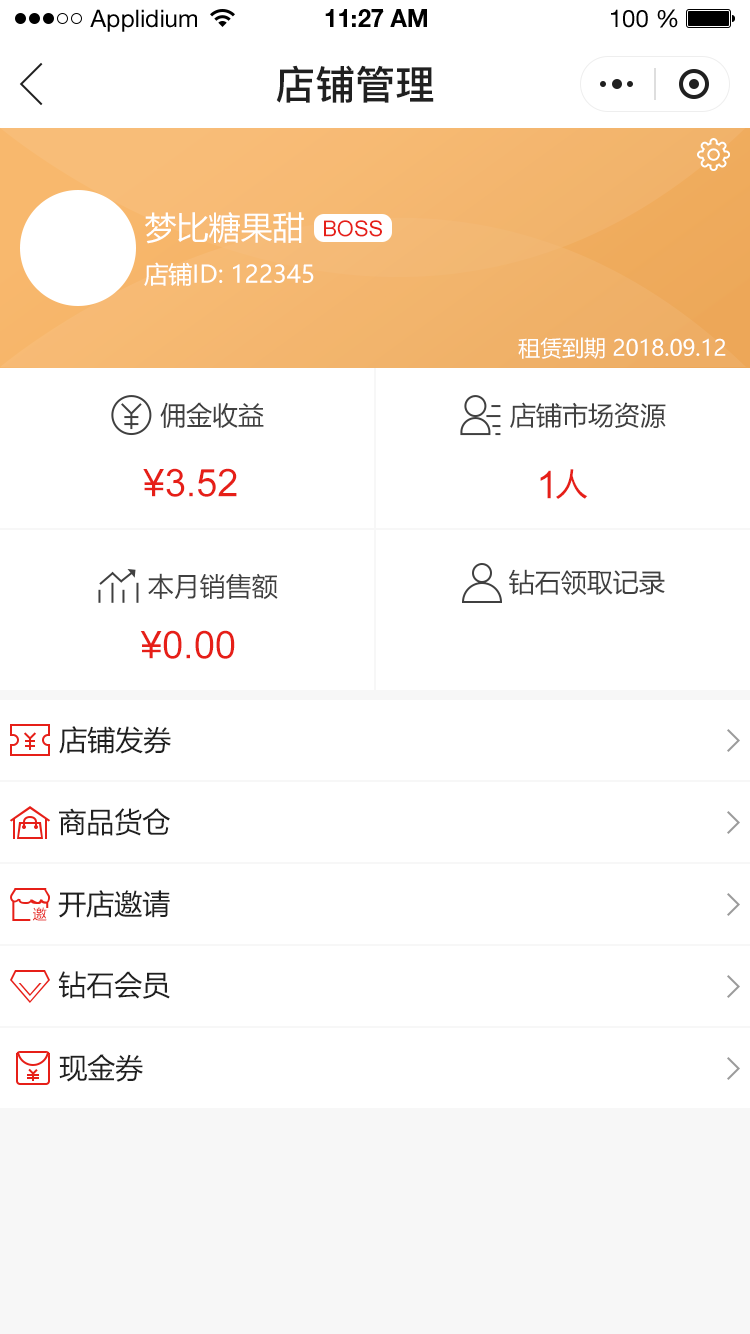
<style>
.page{position:relative;width:750px;height:1334px;background:#ffffff}
.page>*{position:absolute;margin:0}
.t1{font:24px "HelveticaNeueLTStd-Roman";color:#000000}
.t2{font:24px "HelveticaNeueLTStd-Bd";color:#000000}
.t3{font:40px "PingFang-SC-Bold";color:#202020;text-transform:uppercase}
.t4{font:32px "MicrosoftYaHei";color:#ffffff;text-transform:uppercase}
.t5{font:22px "ArialMT";color:#e61f18;text-transform:uppercase}
.t6{font:24px "MicrosoftYaHei";color:#ffffff;text-transform:uppercase}
.t7{font:22px "MicrosoftYaHei";color:#ffffff;text-transform:uppercase}
.t8{font:26px "MicrosoftYaHei";color:#404040;text-transform:uppercase}
.t9{font:38px "ArialMT";color:#e61f18;text-transform:uppercase}
.t10{font:32px "MicrosoftYaHei";color:#e61f18;text-transform:uppercase}
.t11{font:28px "MicrosoftYaHei";color:#202020;text-transform:uppercase}
.t12{font:14px "MicrosoftYaHei";letter-spacing:0.02em}
</style>
<div class="page">
<p class="t1" style="left:90px;top:9px;width:107px;height:23px">Applidium</p>
<p class="t2" style="left:325px;top:9px;width:102px;height:18px">11:27 AM</p>
<p class="t1" style="left:611px;top:9px;width:67px;height:19px">100 %</p>
<p class="t3" style="left:276px;top:65px;width:158px;height:38px">店铺管理</p>
<p class="t4" style="left:145px;top:212px;width:159px;height:32px">梦比糖果甜</p>
<p class="t5" style="left:324px;top:220px;width:58px;height:17px">boss</p>
<p class="t6" style="left:144px;top:262px;width:170px;height:24px">店铺ID: 122345</p>
<p class="t7" style="left:518px;top:337px;width:208px;height:22px">租赁到期 2018.09.12</p>
<p class="t8" style="left:160px;top:402px;width:104px;height:26px">佣金收益</p>
<p class="t8" style="left:510px;top:402px;width:156px;height:26px">店铺市场资源</p>
<p class="t9" style="left:143px;top:468px;width:94px;height:29px">¥3.52</p>
<p class="t9" style="left:540px;top:470px;width:11px;height:29px">1</p>
<p class="t10" style="left:556px;top:469px;width:32px;height:30px">人</p>
<p class="t8" style="left:509px;top:569px;width:156px;height:26px">钻石领取记录</p>
<p class="t8" style="left:148px;top:573px;width:130px;height:27px">本月销售额</p>
<p class="t9" style="left:140px;top:630px;width:95px;height:29px">¥0.00</p>
<p class="t11" style="left:59px;top:726px;width:112px;height:28px">店铺发券</p>
<p class="t11" style="left:59px;top:808px;width:111px;height:28px">商品货仓</p>
<p class="t11" style="left:58px;top:890px;width:112px;height:28px">开店邀请</p>
<p class="t12" style="left:33px;top:907px;width:14px;height:14px">邀</p>
<p class="t11" style="left:58px;top:971px;width:112px;height:28px">钻石会员</p>
<p class="t11" style="left:59px;top:1054px;width:84px;height:28px">现金券</p>
</div>
